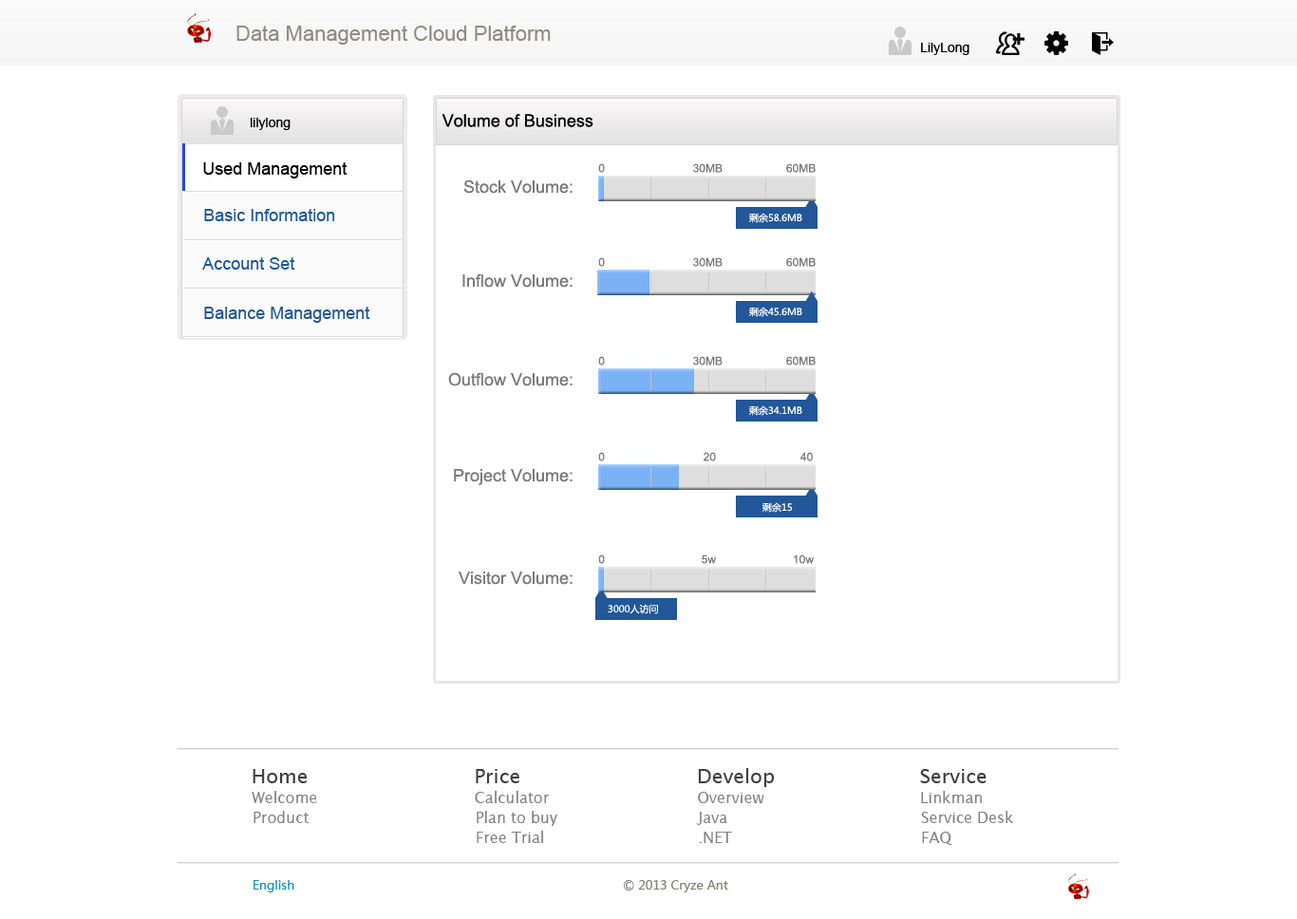
<style>
.page{position:relative;width:1297px;height:919px;background:#ffffff}
.page>*{position:absolute;margin:0}
.t1{font:20.9px "ArialMT";color:#8e8b82}
.t2{font:13.3px "ArialMT";color:#000000}
.t3{font:17.1px "ArialMT";color:#000000}
.t4{font:11.4px "ArialMT";color:#7b7979}
.t5{font:17.1px "ArialMT";color:#7b7979}
.t6{font:17.1px "ArialMT";color:#225799}
.t7{font:9.5px "MicrosoftYaHei";color:#ffffff}
.t8{font:19.9px "LucidaSans";color:#404040}
.t9{font:19.9px "LucidaSans";color:#3f3f3f}
.t10{font:15.2px "LucidaSans";color:#818181}
.t11{font:12.3px "MicrosoftYaHei";color:#1791b8}
.t12{font:12.3px "MicrosoftYaHei";color:#827f74}
</style>
<div class="page">
<p class="t1" style="left:236px;top:26px;width:315px;height:19px">Data Management Cloud Platform</p>
<p class="t2" style="left:921px;top:43px;width:49px;height:12px">LilyLong</p>
<p class="t3" style="left:442px;top:114px;width:152px;height:13px">Volume of Business</p>
<p class="t2" style="left:251px;top:118px;width:40px;height:12px">lilylong</p>
<p class="t3" style="left:203px;top:162px;width:145px;height:17px">Used Management</p>
<p class="t4" style="left:598px;top:163px;width:7px;height:10px">0</p>
<p class="t4" style="left:693px;top:163px;width:30px;height:10px">30MB</p>
<p class="t4" style="left:786px;top:163px;width:30px;height:10px">60MB</p>
<p class="t5" style="left:463px;top:179px;width:110px;height:15px">Stock Volume:</p>
<p class="t6" style="left:204px;top:209px;width:131px;height:12px">Basic Information</p>
<p class="t7" style="left:749px;top:213px;width:53px;height:10px">剩余58.6MB</p>
<p class="t6" style="left:202px;top:257px;width:93px;height:13px">Account Set</p>
<p class="t4" style="left:598px;top:257px;width:7px;height:10px">0</p>
<p class="t4" style="left:693px;top:257px;width:30px;height:10px">30MB</p>
<p class="t4" style="left:786px;top:257px;width:30px;height:10px">60MB</p>
<p class="t5" style="left:462px;top:273px;width:111px;height:15px">Inflow Volume:</p>
<p class="t6" style="left:204px;top:307px;width:166px;height:16px">Balance Management</p>
<p class="t7" style="left:749px;top:307px;width:53px;height:10px">剩余45.6MB</p>
<p class="t4" style="left:598px;top:356px;width:7px;height:10px">0</p>
<p class="t4" style="left:693px;top:356px;width:30px;height:10px">30MB</p>
<p class="t4" style="left:786px;top:356px;width:30px;height:10px">60MB</p>
<p class="t5" style="left:448px;top:372px;width:125px;height:14px">Outflow Volume:</p>
<p class="t7" style="left:749px;top:405px;width:53px;height:11px">剩余34.1MB</p>
<p class="t4" style="left:598px;top:452px;width:7px;height:10px">0</p>
<p class="t4" style="left:704px;top:452px;width:12px;height:10px">20</p>
<p class="t4" style="left:801px;top:452px;width:12px;height:10px">40</p>
<p class="t5" style="left:454px;top:469px;width:119px;height:16px">Project Volume:</p>
<p class="t7" style="left:763px;top:502px;width:30px;height:11px">剩余15</p>
<p class="t4" style="left:598px;top:555px;width:7px;height:9px">0</p>
<p class="t4" style="left:702px;top:555px;width:14px;height:9px">5w</p>
<p class="t4" style="left:794px;top:555px;width:20px;height:9px">10w</p>
<p class="t5" style="left:459px;top:572px;width:114px;height:13px">Visitor Volume:</p>
<p class="t7" style="left:608px;top:604px;width:50px;height:10px">3000人访问</p>
<p class="t8" style="left:253px;top:769px;width:55px;height:14px">Home</p>
<p class="t9" style="left:476px;top:769px;width:43px;height:14px">Price</p>
<p class="t8" style="left:698px;top:768px;width:77px;height:19px">Develop</p>
<p class="t9" style="left:920px;top:769px;width:67px;height:14px">Service</p>
<p class="t10" style="left:252px;top:791px;width:65px;height:12px">Welcome</p>
<p class="t10" style="left:475px;top:791px;width:75px;height:12px">Calculator</p>
<p class="t10" style="left:698px;top:792px;width:66px;height:11px">Overview</p>
<p class="t10" style="left:921px;top:791px;width:61px;height:12px">Linkman</p>
<p class="t10" style="left:254px;top:811px;width:55px;height:12px">Product</p>
<p class="t10" style="left:477px;top:811px;width:80px;height:15px">Plan to buy</p>
<p class="t10" style="left:696px;top:812px;width:31px;height:13px">Java</p>
<p class="t10" style="left:921px;top:811px;width:92px;height:12px">Service Desk</p>
<p class="t10" style="left:477px;top:831px;width:66px;height:12px">Free Trial</p>
<p class="t10" style="left:699px;top:832px;width:33px;height:11px">.NET</p>
<p class="t10" style="left:922px;top:832px;width:30px;height:14px">FAQ</p>
<p class="t11" style="left:254px;top:880px;width:40px;height:13px">English</p>
<p class="t12" style="left:624px;top:880px;width:104px;height:13px">© 2013 Cryze Ant</p>
</div>
